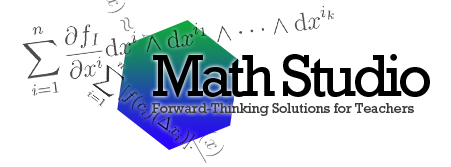
<style>
.page{position:relative;width:451px;height:167px;background:#ffffff}
.page>*{position:absolute;margin:0}
.t1{font:60px "Rockwell";letter-spacing:-0.075em;color:#000000}
.t2{font:14px "Rockwell";color:#3c3a3a}
</style>
<div class="page">
<p class="t1" style="left:153px;top:54px;width:277px;height:43px">Math Studio</p>
<p class="t2" style="left:152px;top:103px;width:262px;height:13px">Forward-Thinking Solutions for Teachers</p>
</div>
